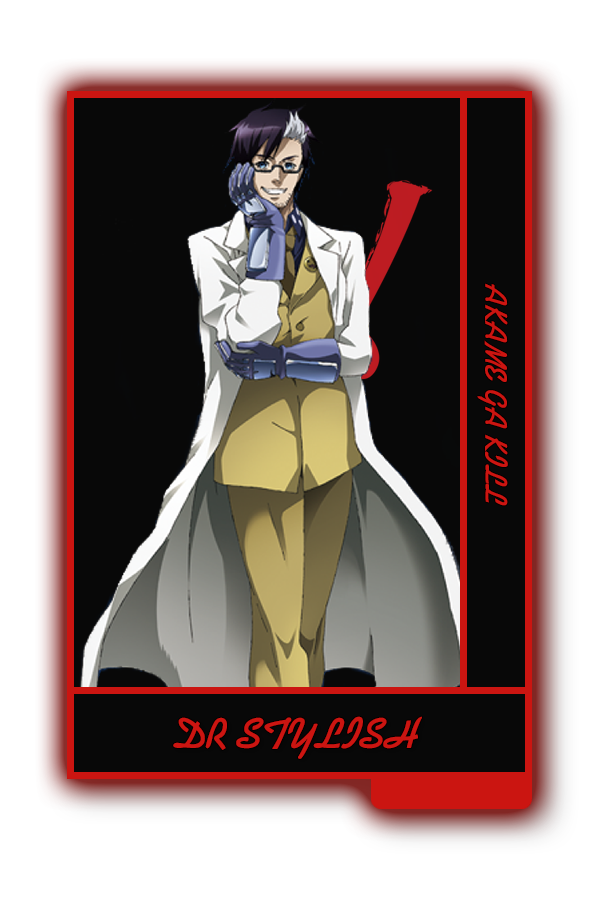
<style>
.page{position:relative;width:600px;height:900px;background:#080808}
.page>*{position:absolute;margin:0}
.t1{font:31.2px "Alako-Bold";color:#cb1511}
.t2{font:43.2px "Alako-Bold";color:#cb1511}
</style>
<div class="page">
<p class="t1" style="left:477px;top:283px;width:31px;height:223px;rotate:90deg">AKAME GA KILL</p>
<p class="t2" style="left:173px;top:716px;width:249px;height:43px">DR STYLISH</p>
</div>
